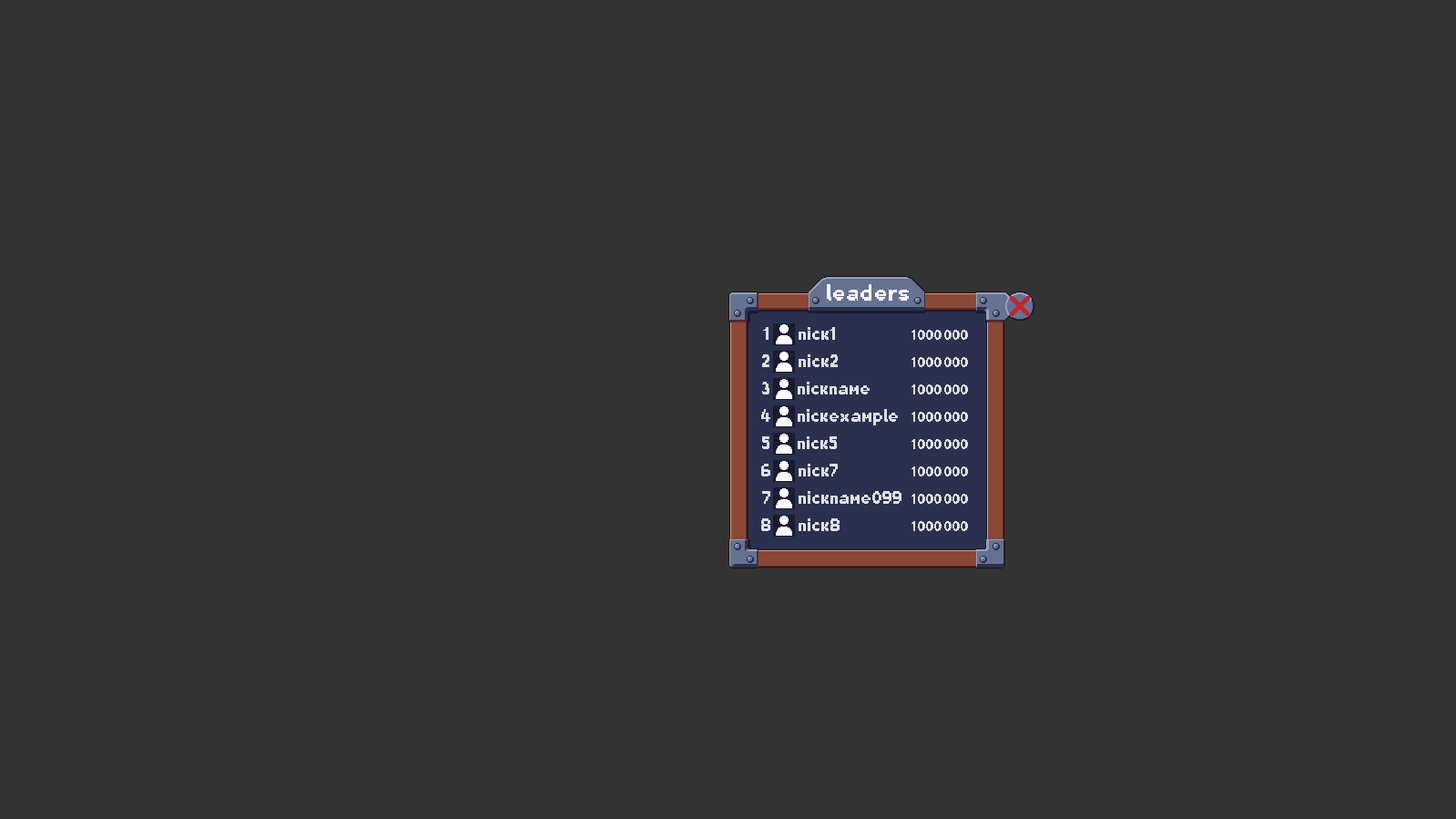
<style>
.page{position:relative;width:1456px;height:819px;background:#333333}
.page>*{position:absolute;margin:0}
.t1{font:23.7px "Planes_ValMore-Bold";color:#fcfefe}
.t2{font:18.2px "Planes_ValMore-Bold";color:#dde2e9}
.t3{font:14.6px "Planes_ValMore-Bold";color:#dde2e9}
</style>
<div class="page">
<p class="t1" style="left:827px;top:284px;width:82px;height:17px">leaders</p>
<p class="t2" style="left:763px;top:327px;width:6px;height:13px">1</p>
<p class="t2" style="left:799px;top:327px;width:36px;height:13px">nick1</p>
<p class="t3" style="left:912px;top:330px;width:56px;height:10px">1000000</p>
<p class="t2" style="left:762px;top:354px;width:8px;height:13px">2</p>
<p class="t2" style="left:799px;top:354px;width:39px;height:13px">nick2</p>
<p class="t3" style="left:912px;top:357px;width:56px;height:10px">1000000</p>
<p class="t2" style="left:762px;top:382px;width:8px;height:12px">3</p>
<p class="t2" style="left:798px;top:382px;width:72px;height:12px">nickname</p>
<p class="t3" style="left:912px;top:384px;width:56px;height:10px">1000000</p>
<p class="t2" style="left:761px;top:409px;width:10px;height:13px">4</p>
<p class="t2" style="left:798px;top:409px;width:100px;height:16px">nickexample</p>
<p class="t3" style="left:912px;top:412px;width:56px;height:10px">1000000</p>
<p class="t2" style="left:762px;top:436px;width:8px;height:13px">5</p>
<p class="t2" style="left:798px;top:436px;width:39px;height:13px">nick5</p>
<p class="t3" style="left:912px;top:439px;width:56px;height:10px">1000000</p>
<p class="t2" style="left:761px;top:464px;width:10px;height:12px">6</p>
<p class="t2" style="left:799px;top:464px;width:39px;height:12px">nick7</p>
<p class="t3" style="left:912px;top:466px;width:56px;height:10px">1000000</p>
<p class="t2" style="left:762px;top:491px;width:9px;height:13px">7</p>
<p class="t2" style="left:799px;top:491px;width:103px;height:13px">nickname099</p>
<p class="t3" style="left:912px;top:494px;width:56px;height:10px">1000000</p>
<p class="t2" style="left:761px;top:518px;width:10px;height:13px">8</p>
<p class="t2" style="left:799px;top:518px;width:41px;height:13px">nick8</p>
<p class="t3" style="left:912px;top:521px;width:56px;height:10px">1000000</p>
</div>
